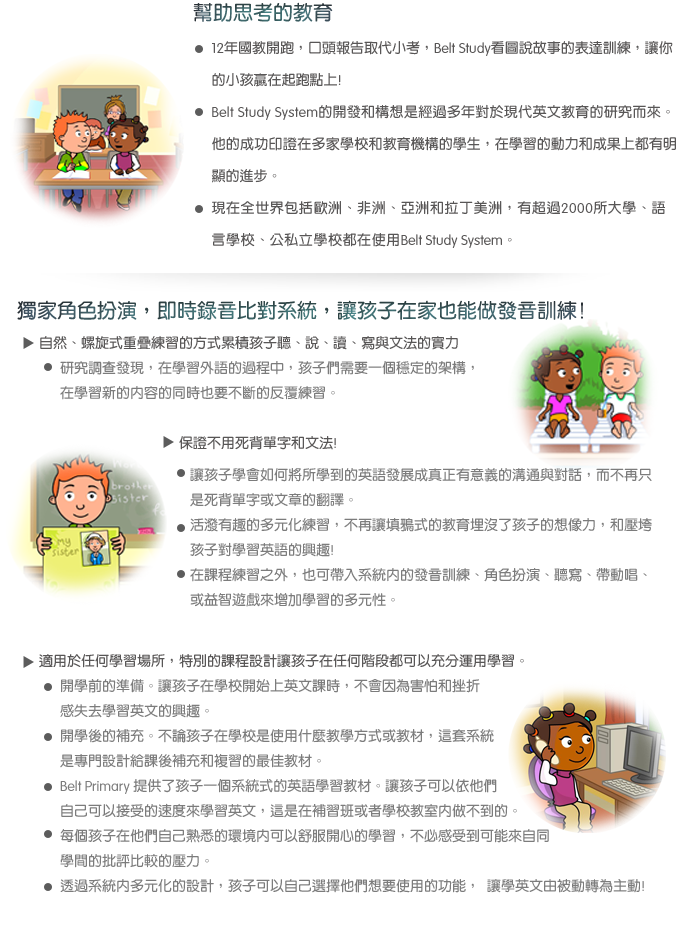
<style>
.page{position:relative;width:679px;height:940px;background:#ffffff}
.page>*{position:absolute;margin:0}
.t1{font:20px "YenRound-Bold"}
.t2{font:14px/32px "YenRound-Bold";letter-spacing:0.02em;color:#585656}
.t3{font:14px/32px "VAGRounded-Light";color:#585656}
.t4{font:14px/32px "YenRound-Bold";color:#585656}
.t5{font:14px/32px "VAGRounded-Light";letter-spacing:0.02em;color:#585656}
.t6{font:14px/32px "YenRound-Bold";letter-spacing:0.04em;color:#585656}
.t7{font:14px/32px "VAGRounded-Light";letter-spacing:0.04em;color:#585656}
.t8{font:14px/25px "YenRound-Bold";color:#7c7c7c}
.t9{font:14px/25px "YenRound-Bold";color:#585656}
.t10{font:14px/25px "VAGRounded-Light";color:#585656}
.t11{font:14px/25px "VAGRounded-Light";color:#7c7c7c}
</style>
<div class="page">
<p class="t1" style="left:193px;top:2px;width:140px;height:20px">幫助思考的教育</p>
<p class="t2" style="left:211px;top:41px;width:465px;height:207px"><span class="t3">12</span><span class="t4">年國教開跑，口頭報告取代小考，</span><span class="t3">Belt Study</span><span class="t4">看圖說故事的表達訓練，讓你的小孩贏在起跑點上</span><span class="t3">! <br></span><span class="t5">Belt Study System</span>的開發和構想是經過多年對於現代英文教育的研究而來。他的成功印證在多家學校和<span class="t4">教育機構的學生，在學習的動力和成果上都有明顯的進步。<br></span><span class="t6">現在全世界包括歐洲、非洲、亞洲和拉丁美洲，有超過</span><span class="t7">2000</span><span class="t6">所大學、語言學校、公私立學校都在使用</span><span class="t3">Belt Study System</span><span class="t4">。</span></p>
<p class="t1" style="left:17px;top:300px;width:566px;height:20px">獨家角色扮演，即時錄音比對系統，讓孩子在家也能做發音訓練!</p>
<p class="t8" style="left:40px;top:336px;width:434px;height:114px"><span class="t9">自然、螺旋式重疊練習的方式累積孩子聽、說、讀、寫與文法的實力<br>   </span>研究調查發現，在學習外語的過程中，孩子們需要一個穩定的架構， <br>   在學習新的內容的同時也要不斷的反覆練習。 <br> <br><span class="t9">                    保證不用死背單字和文法</span><span class="t10">!</span></p>
<p class="t8" style="left:190px;top:467px;width:462px;height:140px">讓孩子學會如何將所學到的英語發展成真正有意義的溝通與對話，而不再只<br>   是死背單字或文章的翻譯。<br>   活潑有趣的多元化練習，不再讓填鴉式的教育埋沒了孩子的想像力，和壓垮<br>   孩子對學習英語的興趣<span class="t11">!<br></span>   在課程練習之外，也可帶入系統內的發音訓練、角色扮演、聽寫、帶動唱、  <br>   或益智遊戲來增加學習的多元性。</p>
<p class="t8" style="left:39px;top:653px;width:605px;height:240px"><span class="t9">適用於任何學習場所，特別的課程設計讓孩子在任何階段都可以充分運用學習。<br></span>   開學前的準備。讓孩子在學校開始上英文課時，不會因為害怕和挫折<br>   感失去學習英文的興趣。<br>   開學後的補充。不論孩子在學校是使用什麼教學方式或教材，這套系統<br>   是專門設計給課後補充和複習的最佳教材。<span class="t11"><br>      Belt Primary </span>提供了孩子一個系統式的英語學習教材。讓孩子可以依他們<br>   自己可以接受的速度來學習英文，這是在補習班或者學校教室內做不到的。<br>   每個孩子在他們自己熟悉的環境內可以舒服開心的學習，不必感受到可能來自同<br>   學間的批評比較的壓力。<br>   透過系統內多元化的設計，孩子可以自己選擇他們想要使用的功能， 讓學英文由被動轉為主動<span class="t11">!</span></p>
</div>
